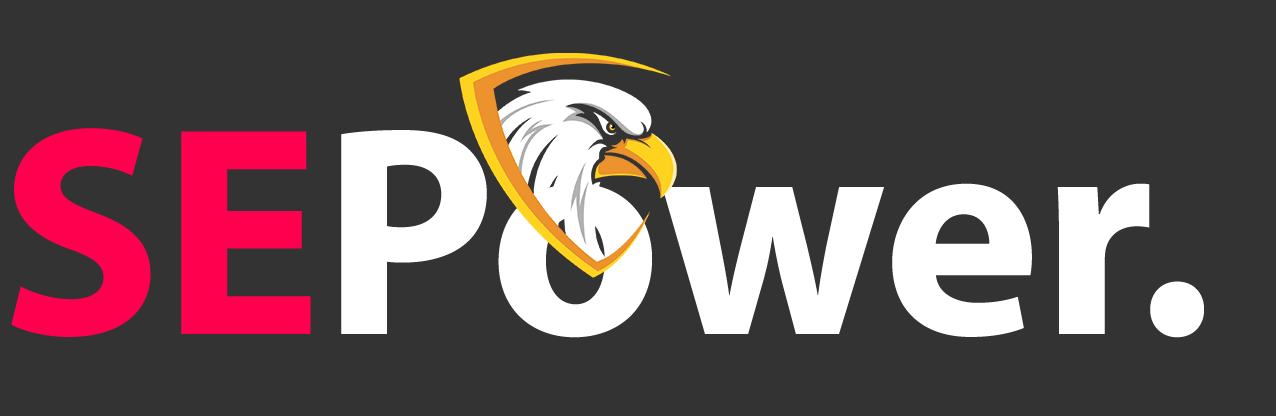
<style>
.page{position:relative;width:1276px;height:416px;background:#333333}
.page>*{position:absolute;margin:0}
.t1{font:300px "MyriadPro-Bold";color:#ffffff}
.t2{font:300px "MyriadPro-Bold";color:#ff004f}
</style>
<div class="page">
<p class="t1" style="left:11px;top:128px;width:1193px;height:210px"><span class="t2">SE</span>Power.</p>
</div>
